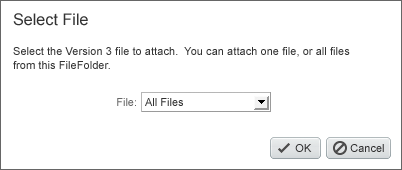
<style>
.page{position:relative;width:402px;height:170px;background:#ffffff}
.page>*{position:absolute;margin:0}
.t1{font:16px "ArialMT";letter-spacing:0.005em;color:#333333}
.t2{font:11px/14px "ArialMT";letter-spacing:0.005em;color:#333333}
.t3{font:11px "ArialMT";color:#666666}
.t4{font:11px "ArialMT";color:#303030}
</style>
<div class="page">
<p class="t1" style="left:13px;top:13px;width:75px;height:13px">Select File</p>
<p class="t2" style="left:13px;top:47px;width:337px;height:22px">Select the Version 3 file to attach.  You can attach one file, or all files<br>from this FileFolder.</p>
<p class="t3" style="left:117px;top:98px;width:19px;height:8px">File:</p>
<p class="t4" style="left:145px;top:98px;width:38px;height:8px">All Files</p>
<p class="t4" style="left:295px;top:144px;width:17px;height:8px">OK</p>
<p class="t4" style="left:350px;top:144px;width:34px;height:8px">Cancel</p>
</div>
